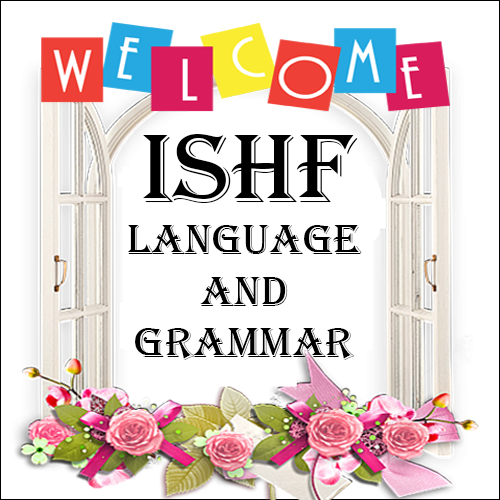
<style>
.page{position:relative;width:500px;height:500px;background:#ffffff}
.page>*{position:absolute;margin:0}
.t1{font:100px "Algerian";color:#000000;scale:1.05 1}
.t2{font:42.6px "Algerian";color:#000000;scale:1.05 1}
</style>
<div class="page">
<p class="t1" style="left:143px;top:134px;width:215px;height:69px">ishf</p>
<p class="t2" style="left:128px;top:225px;width:234px;height:135px;text-align:center">language<br>and<br>grammar</p>
</div>
